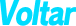
<style>
.page{position:relative;width:76px;height:26px;background:#00dcfe}
.page>*{position:absolute;margin:0}
.t1{font:32px "RodinPro-EB";letter-spacing:-0.054em;color:#00dcfe;font-style:italic;scale:0.84 1}
</style>
<div class="page">
<p class="t1" style="left:0px;top:0px;width:76px;height:26px">Voltar</p>
</div>
